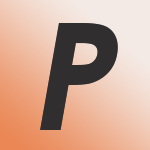
<style>
.page{position:relative;width:150px;height:150px}
.page>*{position:absolute;margin:0}
.t1{font:148.7px "CenturyGothic-Bold";color:#302e2e;font-style:italic}
</style>
<div class="page">
<p class="t1" style="left:40px;top:23px;width:78px;height:107px">P</p>
</div>
